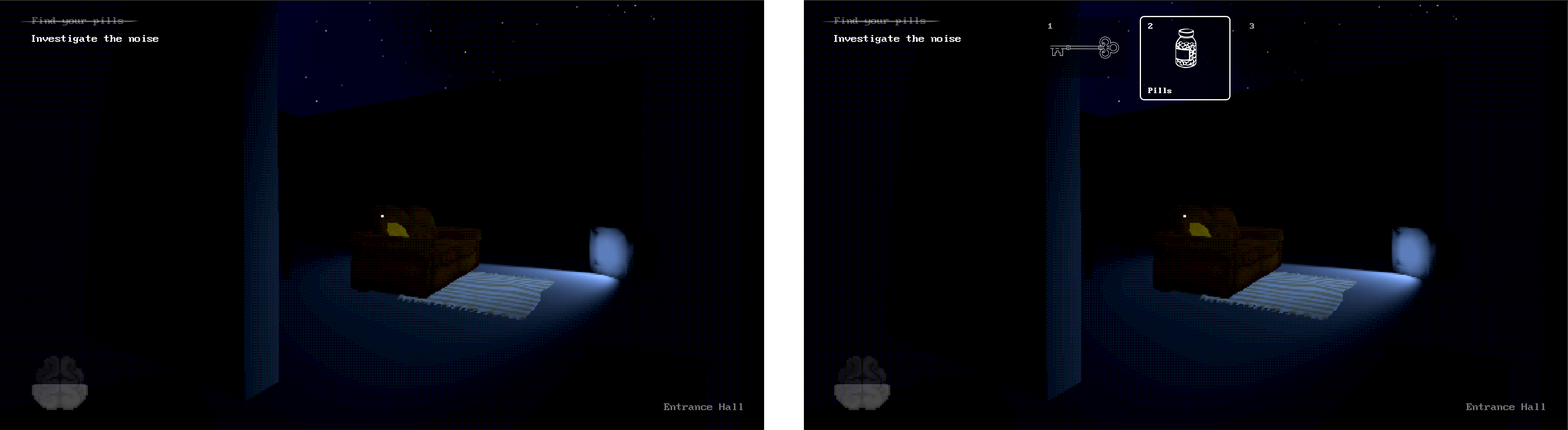
<style>
.page{position:relative;width:1568px;height:430px;background:#000000}
.page>*{position:absolute;margin:0}
.t1{font:12.3px "ModernDOS8x14";color:#58585d}
.t2{font:9.6px "ModernDOS8x14";color:#a3a3a3}
.t3{font:9.6px "ModernDOS8x14";color:#ffffff}
.t4{font:9.6px "ModernDOS8x14";color:#a3a3a4}
.t5{font:12.3px "ModernDOS8x14";color:#ffffff}
.t6{font:12.3px "ModernDOS8x14";color:#747474}
</style>
<div class="page">
<p class="t1" style="left:32px;top:17px;width:91px;height:8px">Find your pills</p>
<p class="t1" style="left:834px;top:17px;width:92px;height:8px">Find your pills</p>
<p class="t2" style="left:1048px;top:23px;width:4px;height:6px">1</p>
<p class="t3" style="left:1148px;top:23px;width:5px;height:6px">2</p>
<p class="t4" style="left:1250px;top:23px;width:4px;height:6px">3</p>
<p class="t5" style="left:32px;top:35px;width:126px;height:8px">Investigate the noise</p>
<p class="t5" style="left:834px;top:35px;width:127px;height:8px">Investigate the noise</p>
<p class="t3" style="left:1148px;top:88px;width:24px;height:5px">Pills</p>
<p class="t6" style="left:664px;top:403px;width:79px;height:7px">Entrance Hall</p>
<p class="t6" style="left:1466px;top:403px;width:79px;height:7px">Entrance Hall</p>
</div>
